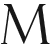
<style>
.page{position:relative;width:50px;height:50px;background:#ffffff}
.page>*{position:absolute;margin:0}
.t1{font:55px "FelixTitlingMT";color:#171717}
</style>
<div class="page">
<p class="t1" style="left:1px;top:4px;width:49px;height:40px">M</p>
</div>
